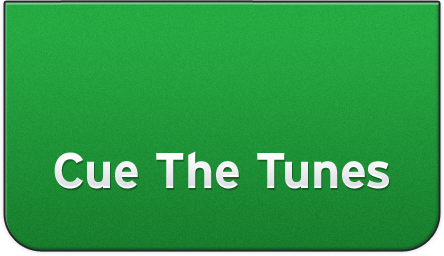
<style>
.page{position:relative;width:444px;height:256px}
.page>*{position:absolute;margin:0}
.t1{font:50px "Interstate-Bold";color:#ffffff}
</style>
<div class="page">
<p class="t1" style="left:54px;top:151px;width:335px;height:38px">Cue The Tunes</p>
</div>
